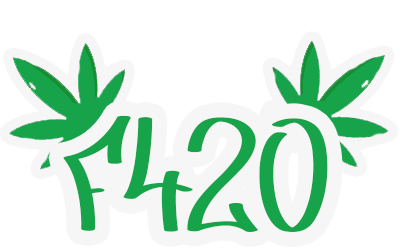
<style>
.page{position:relative;width:400px;height:250px;background:#ffffff}
.page>*{position:absolute;margin:0}
.t1{font:154px "Type2";letter-spacing:0.05em;color:#16a34a;scale:0.78 1}
</style>
<div class="page">
<p class="t1" style="left:63px;top:115px;width:265px;height:117px">F420</p>
</div>
